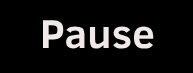
<style>
.page{position:relative;width:193px;height:73px;background:#000000}
.page>*{position:absolute;margin:0}
.t1{font:41px "ClearSans-Bold";color:#f1e9e9}
</style>
<div class="page">
<p class="t1" style="left:43px;top:20px;width:111px;height:29px">Pause</p>
</div>
